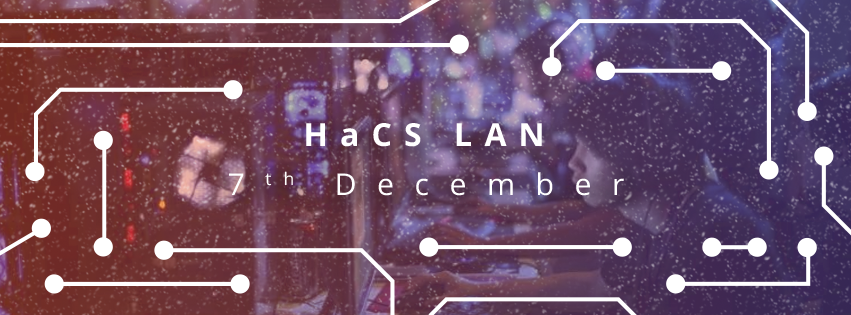
<style>
.page{position:relative;width:851px;height:315px}
.page>*{position:absolute;margin:0}
.t1{font:31.8px "OpenSans-Bold";letter-spacing:0.38em;color:#ffffff}
.t2{font:30.1px "OpenSans";letter-spacing:0.68em;color:#ffffff}
</style>
<div class="page">
<p class="t1" style="left:306px;top:123px;width:236px;height:24px">HaCS LAN</p>
<p class="t2" style="left:229px;top:171px;width:395px;height:25px">7th December</p>
</div>
